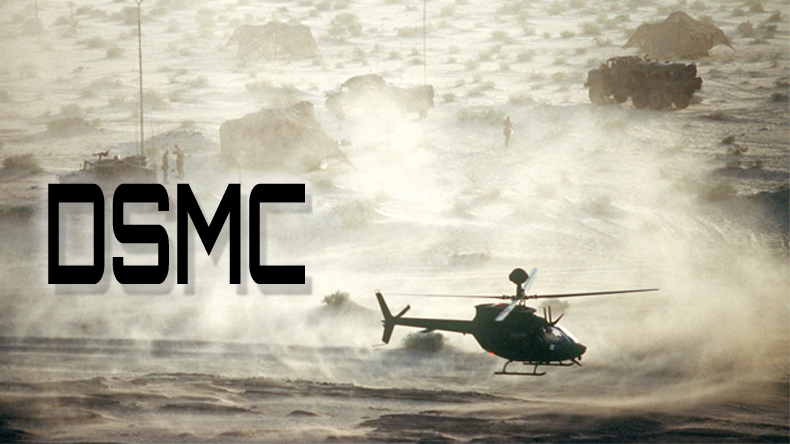
<style>
.page{position:relative;width:790px;height:444px}
.page>*{position:absolute;margin:0}
.t1{font:138.9px "Orbitron-Bold";color:#000000;scale:0.56 1}
</style>
<div class="page">
<p class="t1" style="left:48px;top:183px;width:257px;height:101px">DSMC</p>
</div>
